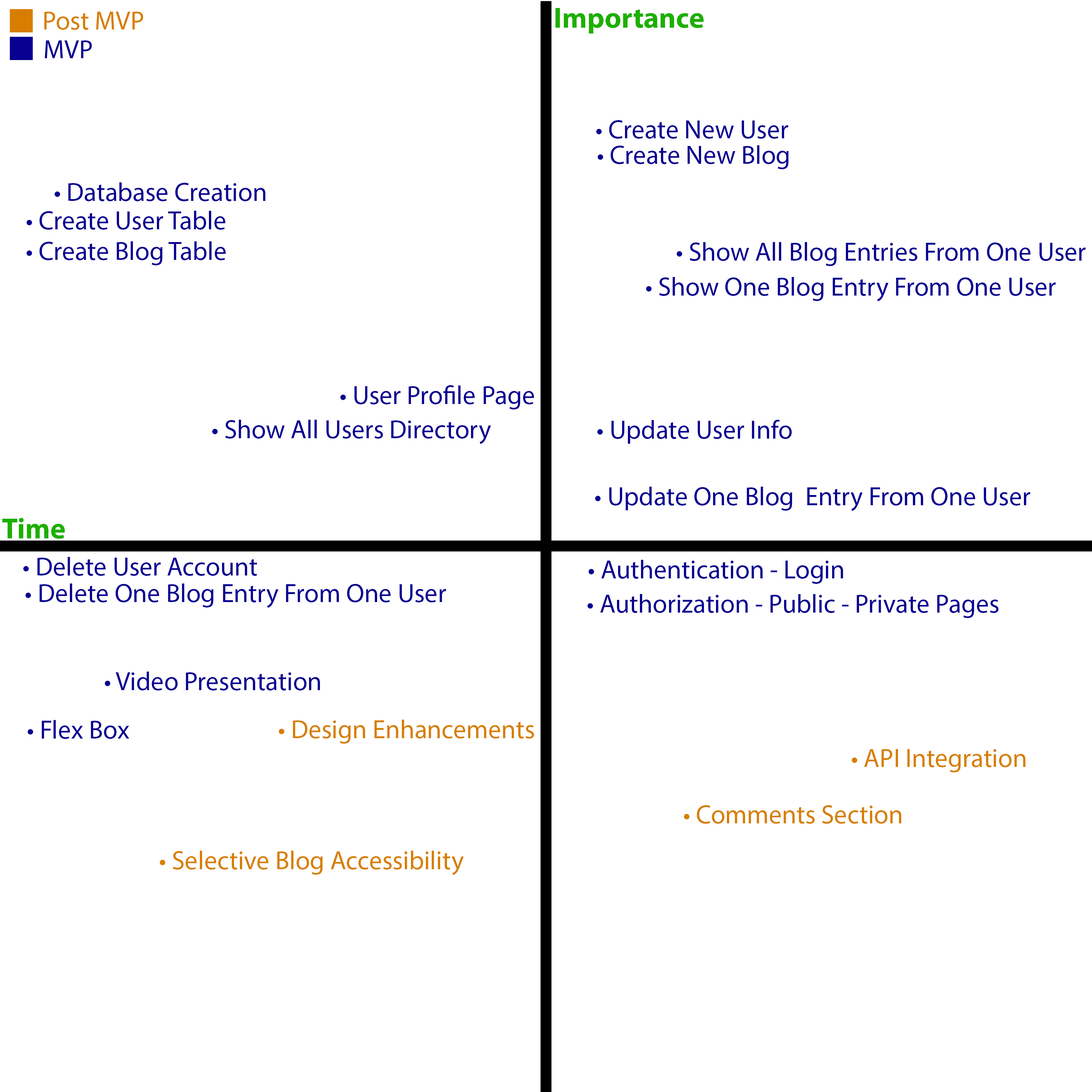
<style>
.page{position:relative;width:1092px;height:1092px;background:#ffffff}
.page>*{position:absolute;margin:0}
.t1{font:26.2px "MyriadPro-Regular";color:#d77e00}
.t2{font:29.1px "MyriadPro-Bold";color:#1daf00}
.t3{font:26.2px "MyriadPro-Regular";color:#070091}
</style>
<div class="page">
<p class="t1" style="left:44px;top:12px;width:99px;height:18px">Post MVP</p>
<p class="t2" style="left:555px;top:8px;width:149px;height:25px">Importance</p>
<p class="t3" style="left:45px;top:40px;width:47px;height:18px">MVP</p>
<p class="t3" style="left:596px;top:120px;width:192px;height:19px">• Create New User</p>
<p class="t3" style="left:598px;top:145px;width:191px;height:24px">• Create New Blog</p>
<p class="t3" style="left:55px;top:182px;width:210px;height:19px">• Database Creation</p>
<p class="t3" style="left:27px;top:211px;width:198px;height:19px">• Create User Table</p>
<p class="t3" style="left:27px;top:241px;width:199px;height:24px">• Create Blog Table</p>
<p class="t3" style="left:677px;top:242px;width:409px;height:24px">• Show All Blog Entries From One User</p>
<p class="t3" style="left:646px;top:277px;width:410px;height:24px">• Show One Blog Entry From One User</p>
<p class="t3" style="left:340px;top:385px;width:194px;height:24px">• User Profile Page</p>
<p class="t3" style="left:212px;top:420px;width:279px;height:24px">• Show All Users Directory</p>
<p class="t3" style="left:597px;top:420px;width:195px;height:24px">• Update User Info</p>
<p class="t3" style="left:595px;top:487px;width:435px;height:24px">• Update One Blog  Entry From One User</p>
<p class="t2" style="left:2px;top:518px;width:63px;height:21px">Time</p>
<p class="t3" style="left:23px;top:557px;width:234px;height:19px">• Delete User Account</p>
<p class="t3" style="left:589px;top:560px;width:254px;height:24px">• Authentication - Login</p>
<p class="t3" style="left:25px;top:583px;width:421px;height:25px">• Delete One Blog Entry From One User</p>
<p class="t3" style="left:587px;top:594px;width:411px;height:24px">• Authorization - Public - Private Pages</p>
<p class="t3" style="left:105px;top:672px;width:215px;height:18px">• Video Presentation</p>
<p class="t3" style="left:28px;top:720px;width:101px;height:19px">• Flex Box</p>
<p class="t1" style="left:279px;top:720px;width:255px;height:24px">• Design Enhancements</p>
<p class="t1" style="left:852px;top:749px;width:173px;height:23px">• API Integration</p>
<p class="t1" style="left:684px;top:805px;width:217px;height:19px">• Comments Section</p>
<p class="t1" style="left:160px;top:851px;width:304px;height:24px">• Selective Blog Accessibility</p>
</div>
